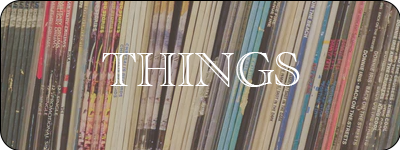
<style>
.page{position:relative;width:400px;height:150px}
.page>*{position:absolute;margin:0}
.t1{font:50px "AcademyEngravedLetPlain";color:#ffffff}
</style>
<div class="page">
<p class="t1" style="left:102px;top:52px;width:198px;height:35px">THINGS</p>
</div>
